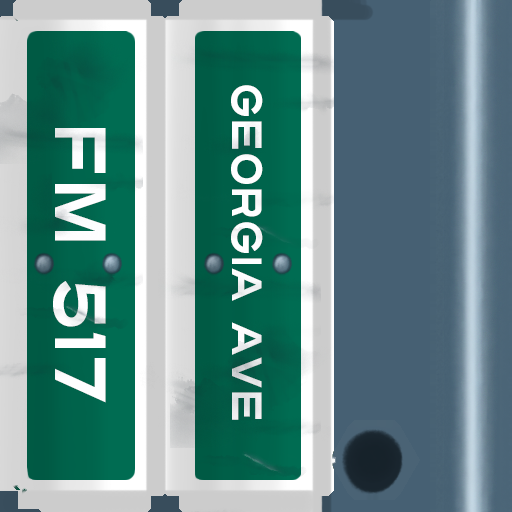
<style>
.page{position:relative;width:512px;height:512px}
.page>*{position:absolute;margin:0}
.t1{font:42px "Turnpike";color:#fefeff;scale:0.75 1}
.t2{font:72px "Turnpike";color:#fefeff;scale:0.75 1}
</style>
<div class="page">
<p class="t1" style="left:231px;top:85px;width:32px;height:335px;rotate:90deg">Georgia Ave</p>
<p class="t2" style="left:53px;top:128px;width:53px;height:275px;rotate:90deg">fm 517</p>
</div>
